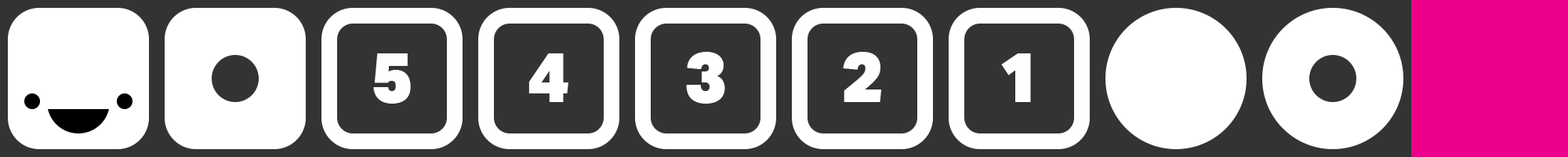
<style>
.page{position:relative;width:1568px;height:157px;background:#ffffff}
.page>*{position:absolute;margin:0}
.t1{font:70.6px "AktivGrotesk-Black";color:#ffffff}
</style>
<div class="page">
<p class="t1" style="left:373px;top:53px;width:38px;height:50px">5</p>
<p class="t1" style="left:528px;top:53px;width:40px;height:49px">4</p>
<p class="t1" style="left:686px;top:52px;width:39px;height:51px">3</p>
<p class="t1" style="left:843px;top:52px;width:39px;height:50px">2</p>
<p class="t1" style="left:1001px;top:53px;width:30px;height:49px">1</p>
</div>
